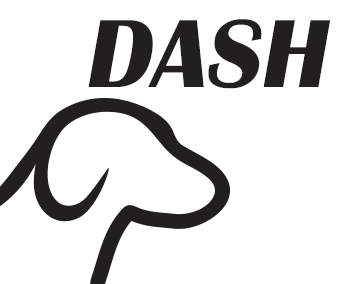
<style>
.page{position:relative;width:340px;height:284px;background:#ffffff}
.page>*{position:absolute;margin:0}
.t1{font:100px "BritannicBold";color:#221f1f;font-style:italic}
</style>
<div class="page">
<p class="t1" style="left:88px;top:19px;width:242px;height:70px">DASH</p>
</div>
